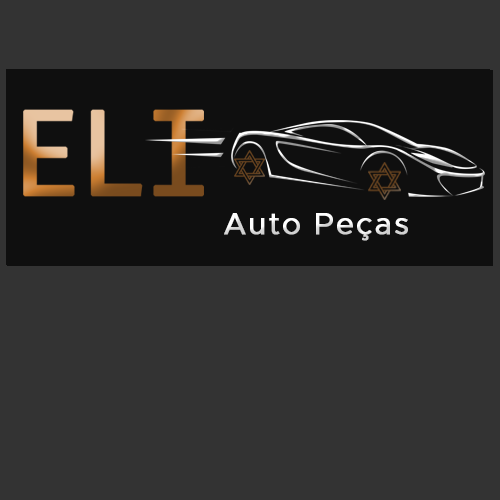
<style>
.page{position:relative;width:500px;height:500px;background:#333333}
.page>*{position:absolute;margin:0}
.t1{font:30px "Metropolis-Regular";letter-spacing:0.05em;font-weight:bold}
</style>
<div class="page">
<p class="t1" style="left:224px;top:213px;width:184px;height:28px">Auto Peças</p>
</div>
